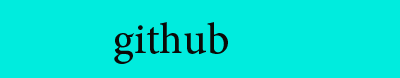
<style>
.page{position:relative;width:400px;height:78px;background:#00ecde}
.page>*{position:absolute;margin:0}
.t1{font:60px "AdobeArabic-Regular";color:#0b0a07}
</style>
<div class="page">
<p class="t1" style="left:114px;top:22px;width:114px;height:42px">github</p>
</div>
